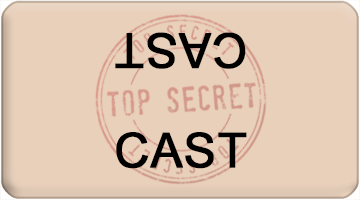
<style>
.page{position:relative;width:360px;height:200px;background:#e8d0bb}
.page>*{position:absolute;margin:0}
.t1{font:48px "ArialMT";color:#000000;font-weight:bold}
</style>
<div class="page">
<p class="t1" style="left:115px;top:32px;width:131px;height:37px;rotate:180deg">CAST</p>
<p class="t1" style="left:116px;top:132px;width:131px;height:37px">CAST</p>
</div>
